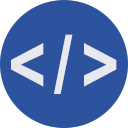
<style>
.page{position:relative;width:128px;height:128px;background:#2d539e}
.page>*{position:absolute;margin:0}
.t1{font:80.1px "ArialNarrow-Bold";letter-spacing:0.1em;color:#e8e9ec}
</style>
<div class="page">
<p class="t1" style="left:11px;top:34px;width:106px;height:60px">&lt;/&gt;</p>
</div>
